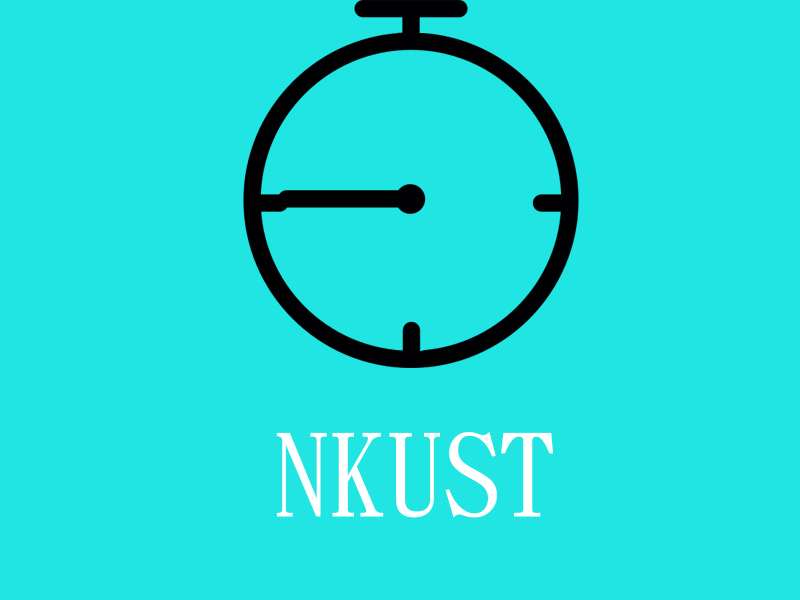
<style>
.page{position:relative;width:800px;height:600px;background:#20e5e3}
.page>*{position:absolute;margin:0}
.t1{font:113px "DFKaiShu-SB-Estd-BF";color:#ffffff}
</style>
<div class="page">
<p class="t1" style="left:276px;top:432px;width:277px;height:86px">NKUST</p>
</div>
